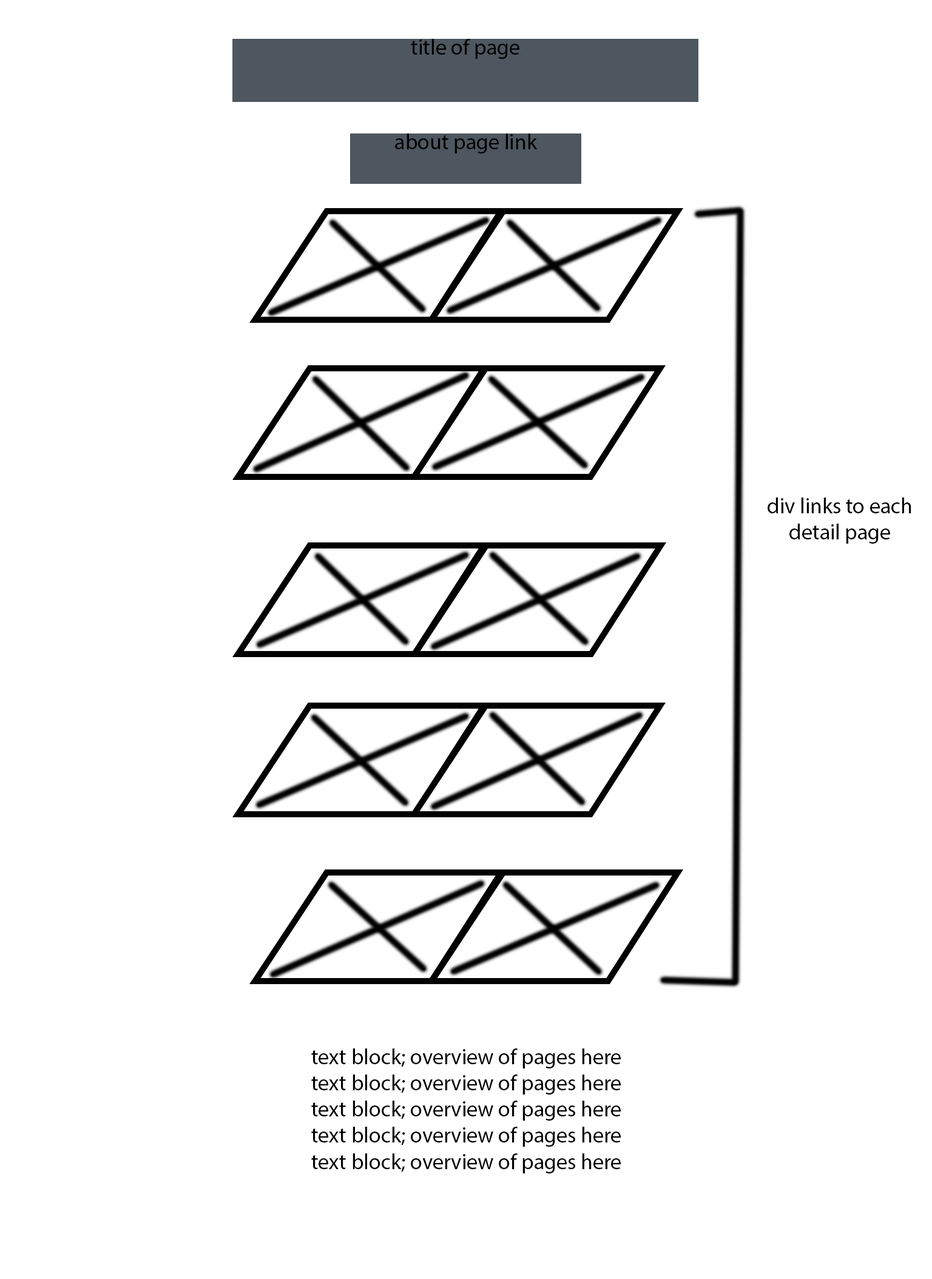
<style>
.page{position:relative;width:932px;height:1279px;background:#ffffff}
.page>*{position:absolute;margin:0}
.t1{font:21.8px "MyriadPro-Regular";color:#000000}
</style>
<div class="page">
<p class="t1" style="left:411px;top:39px;width:108px;height:20px">title of page</p>
<p class="t1" style="left:395px;top:134px;width:143px;height:20px">about page link</p>
<p class="t1" style="left:768px;top:498px;width:143px;height:46px;text-align:center">div links to each detail page</p>
<p class="t1" style="left:311px;top:1049px;width:310px;height:125px;text-align:center">text block; overview of pages here<br>text block; overview of pages here<br>text block; overview of pages here<br>text block; overview of pages here<br>text block; overview of pages here</p>
</div>
